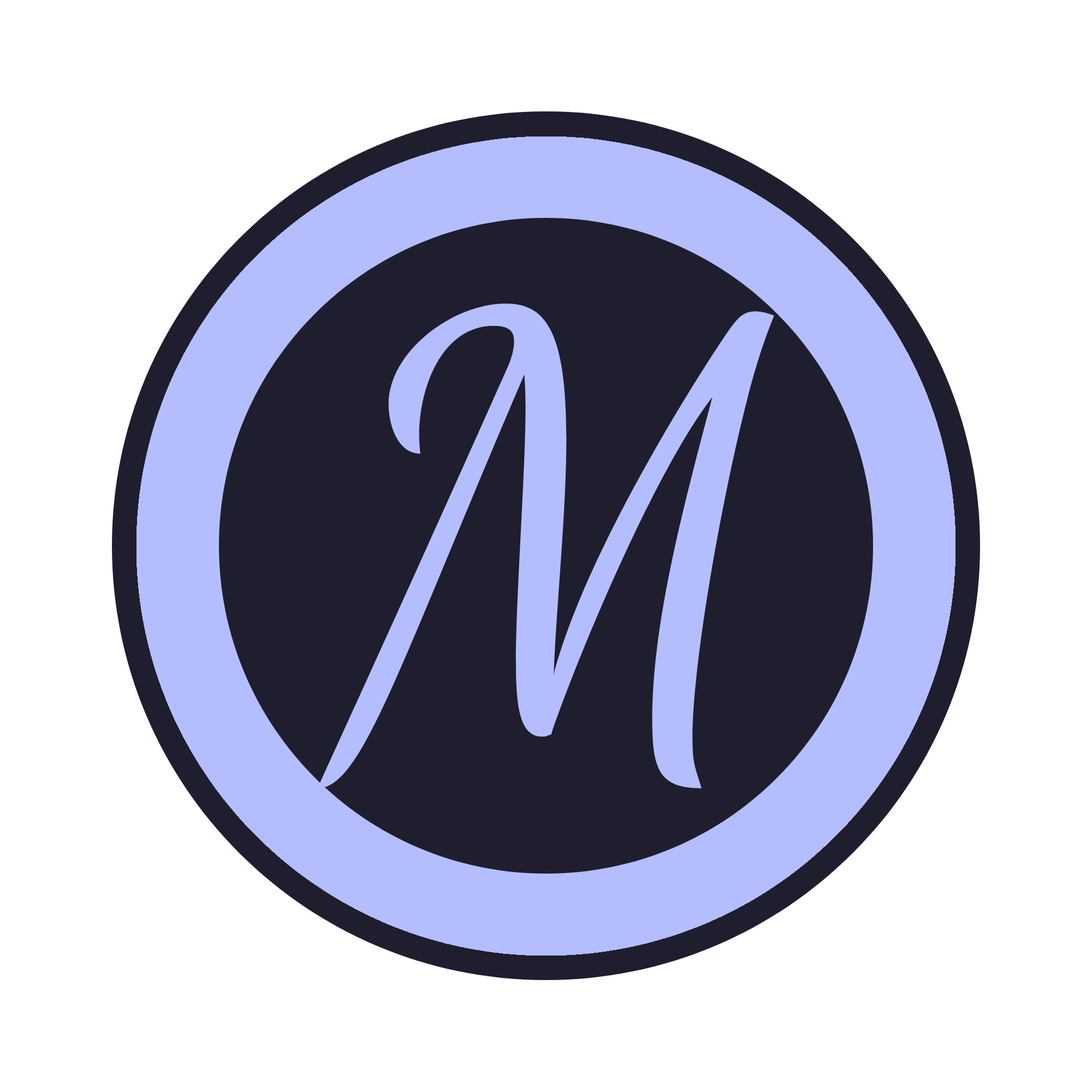
<style>
.page{position:relative;width:1092px;height:1092px;background:#ffffff}
.page>*{position:absolute;margin:0}
.t1{font:600.6px "DancingScriptOT";color:#b4befe}
</style>
<div class="page">
<p class="t1" style="left:317px;top:303px;width:457px;height:485px">M</p>
</div>
